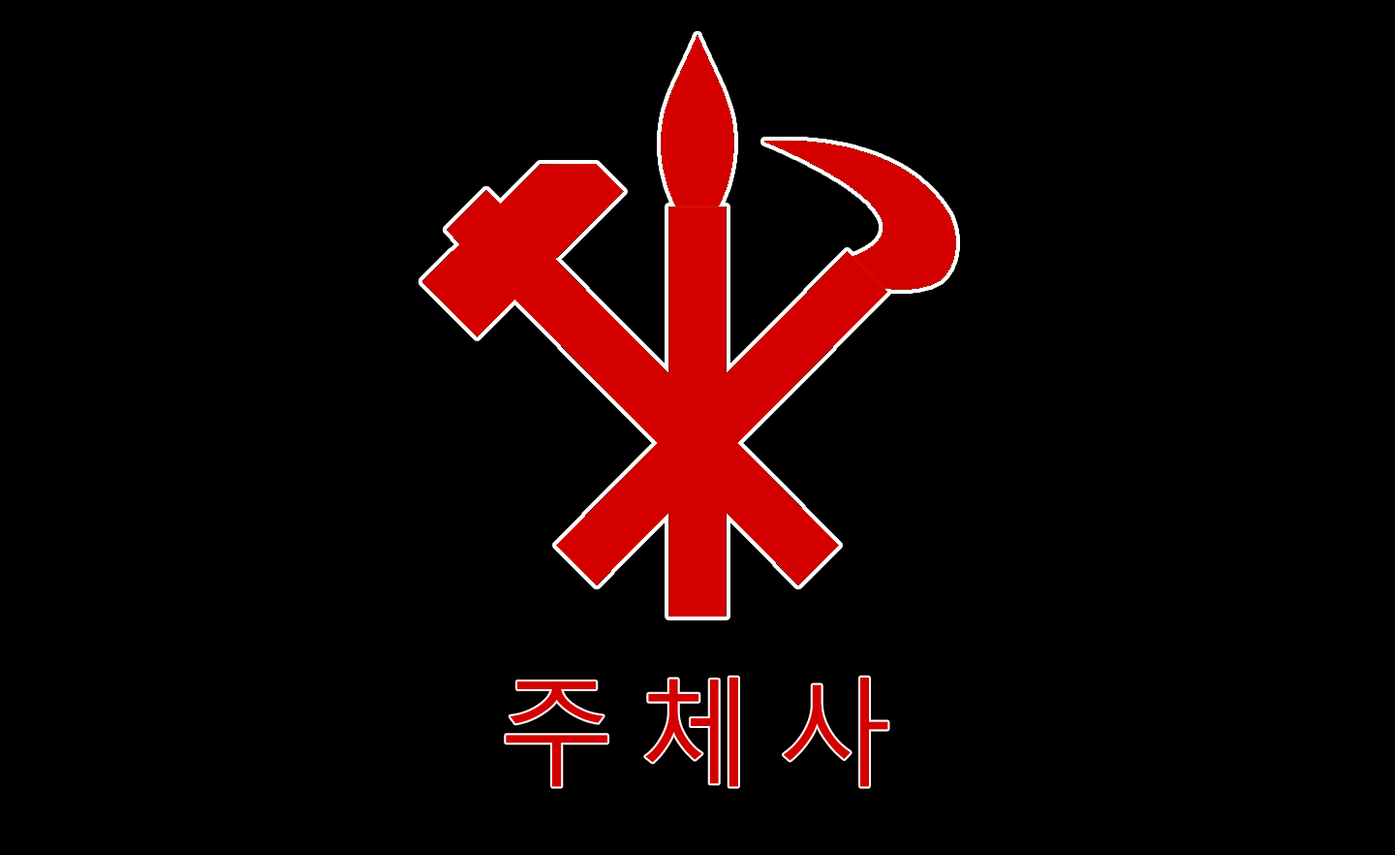
<style>
.page{position:relative;width:1395px;height:855px;background:#000000}
.page>*{position:absolute;margin:0}
.t1{font:115.8px "MalgunGothic";letter-spacing:0.2em;color:#d40000}
</style>
<div class="page">
<p class="t1" style="left:506px;top:676px;width:383px;height:111px">주체사</p>
</div>
